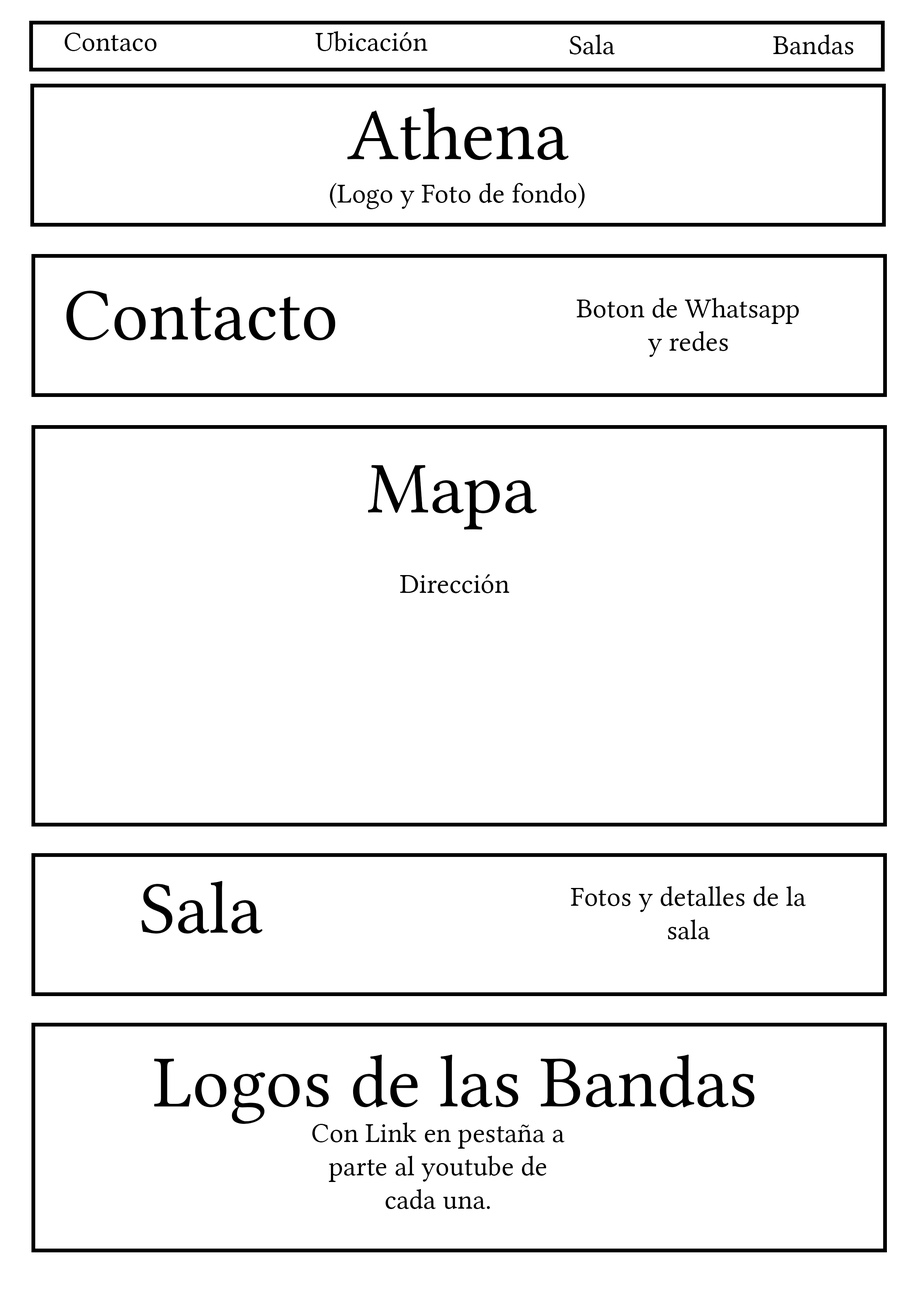
<style>
.page{position:relative;width:918px;height:1299px;background:#ffffff}
.page>*{position:absolute;margin:0}
.t1{font:27.8px "LinLibertine";color:#000000}
.t2{font:74px "LinLibertine";color:#000000}
.t3{font:73.7px "LinLibertine";color:#000000}
</style>
<div class="page">
<p class="t1" style="left:64px;top:33px;width:93px;height:18px">Contaco</p>
<p class="t1" style="left:315px;top:31px;width:113px;height:20px">Ubicación</p>
<p class="t1" style="left:570px;top:34px;width:45px;height:20px">Sala</p>
<p class="t1" style="left:773px;top:34px;width:81px;height:20px">Bandas</p>
<p class="t2" style="left:347px;top:107px;width:222px;height:53px">Athena</p>
<p class="t1" style="left:330px;top:183px;width:255px;height:26px">(Logo y Foto de fondo)</p>
<p class="t2" style="left:66px;top:291px;width:269px;height:49px">Contacto</p>
<p class="t1" style="left:577px;top:298px;width:222px;height:59px;text-align:center">Boton de Whatsapp<br>y redes</p>
<p class="t3" style="left:368px;top:465px;width:169px;height:64px">Mapa</p>
<p class="t1" style="left:400px;top:574px;width:109px;height:19px">Dirección</p>
<p class="t2" style="left:141px;top:881px;width:121px;height:52px">Sala</p>
<p class="t1" style="left:571px;top:886px;width:235px;height:53px;text-align:center">Fotos y detalles de la sala</p>
<p class="t2" style="left:154px;top:1054px;width:601px;height:70px">Logos de las Bandas</p>
<p class="t1" style="left:312px;top:1122px;width:253px;height:87px;text-align:center">Con Link en pestaña a parte al youtube de cada una.</p>
</div>
